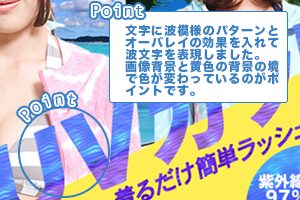
<style>
.page{position:relative;width:300px;height:200px}
.page>*{position:absolute;margin:0}
.t1{font:16px "AndaleMono";letter-spacing:0.075em;color:#367fc3}
.t2{font:12px/12px "HiraKakuStdN-W8";letter-spacing:0.075em;color:#367fc3}
</style>
<div class="page">
<p class="t1" style="left:92px;top:5px;width:51px;height:11px">Point</p>
<p class="t1" style="left:92px;top:5px;width:51px;height:11px">Point</p>
<p class="t2" style="left:125px;top:24px;width:154px;height:72px">文字に波模様のパターンと<br>オーバレイの効果を入れて<br>波文字を表現しました。<br>画像背景と黄色の背景の境<br>で色が変わっているのがポ<br>イントです。</p>
</div>
